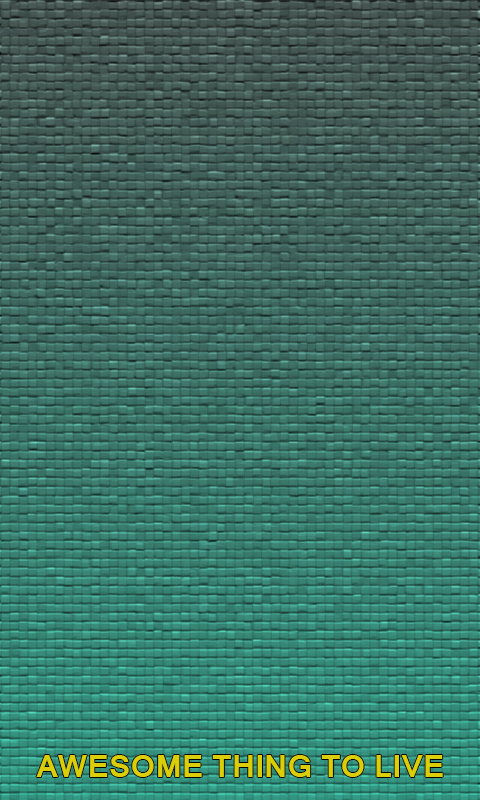
<style>
.page{position:relative;width:480px;height:800px}
.page>*{position:absolute;margin:0}
.t1{font:30px "Kartika-Bold";color:#dace09}
</style>
<div class="page">
<p class="t1" style="left:36px;top:755px;width:407px;height:22px">AWESOME THING TO LIVE</p>
</div>
